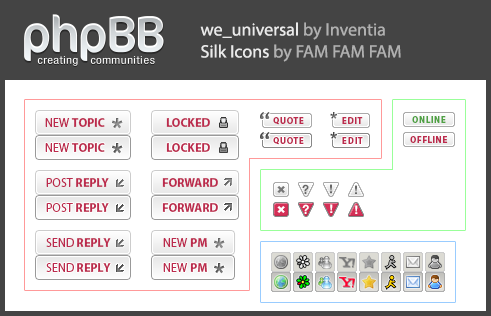
<style>
.page{position:relative;width:491px;height:316px;background:#ffffff}
.page>*{position:absolute;margin:0}
.t1{font:18px/22px "MyriadPro-Regular";color:#b0b0b0}
.t2{font:18px/22px "MyriadPro-Regular";color:#eaeaea}
.t3{font:12px "MyriadPro-Bold";letter-spacing:0.01em;color:#bc2a4d}
.t4{font:12px "MyriadPro-Regular";letter-spacing:0.01em;color:#bc2a4d}
.t5{font:9px "MyriadPro-Bold";letter-spacing:0.05em;color:#bc2a4d;text-transform:uppercase}
.t6{font:9px "MyriadPro-Bold";letter-spacing:0.05em;color:#4fa143;text-transform:uppercase}
.t7{font:9px "MyriadPro-Bold";letter-spacing:0.075em;color:#bc2a4d;text-transform:uppercase}
.t8{font:12.6px "HelveticaNeueLTCom-Bd";color:#666666}
.t9{font:12px "HelveticaNeueLTCom-Bd";color:#666666;scale:1.15 1}
.t10{font:12.6px "HelveticaNeueLTCom-Bd";color:#ffffff}
.t11{font:12px "HelveticaNeueLTCom-Bd";color:#ffffff;scale:1.15 1}
.t12{font:29px "HelveticaNeueLTStd-Bd"}
</style>
<div class="page">
<p class="t1" style="left:200px;top:22px;width:201px;height:40px;text-align:justify"><span class="t2">we_universal </span>by Inventia<br><span class="t2">Silk Icons </span>by FAM FAM FAM</p>
<p class="t3" style="left:45px;top:118px;width:60px;height:9px"><span class="t4">NEW </span>TOPIC</p>
<p class="t3" style="left:166px;top:118px;width:44px;height:9px">LOCKED</p>
<p class="t5" style="left:273px;top:117px;width:31px;height:8px">QUOTE</p>
<p class="t5" style="left:342px;top:117px;width:21px;height:7px">EDIT</p>
<p class="t6" style="left:412px;top:116px;width:34px;height:7px">online</p>
<p class="t5" style="left:273px;top:137px;width:31px;height:8px">QUOTE</p>
<p class="t7" style="left:342px;top:137px;width:21px;height:7px">EDIT</p>
<p class="t5" style="left:410px;top:136px;width:38px;height:7px">offline</p>
<p class="t3" style="left:45px;top:143px;width:60px;height:9px"><span class="t4">NEW </span>TOPIC</p>
<p class="t3" style="left:166px;top:143px;width:44px;height:9px">LOCKED</p>
<p class="t3" style="left:46px;top:178px;width:63px;height:9px"><span class="t4">POST </span>REPLY</p>
<p class="t3" style="left:162px;top:178px;width:56px;height:9px">FORWARD</p>
<p class="t8" style="left:302px;top:184px;width:7px;height:10px">?</p>
<p class="t9" style="left:330px;top:184px;width:2px;height:9px">!</p>
<p class="t9" style="left:355px;top:185px;width:2px;height:9px">!</p>
<p class="t3" style="left:46px;top:203px;width:63px;height:9px"><span class="t4">POST </span>REPLY</p>
<p class="t3" style="left:162px;top:203px;width:56px;height:9px">FORWARD</p>
<p class="t10" style="left:302px;top:204px;width:7px;height:10px">?</p>
<p class="t11" style="left:330px;top:204px;width:3px;height:9px">!</p>
<p class="t11" style="left:355px;top:205px;width:3px;height:9px">!</p>
<p class="t3" style="left:46px;top:238px;width:65px;height:9px"><span class="t4">SEND </span>REPLY</p>
<p class="t4" style="left:163px;top:238px;width:44px;height:9px">NEW <span class="t3">PM</span></p>
<p class="t3" style="left:46px;top:263px;width:65px;height:9px"><span class="t4">SEND </span>REPLY</p>
<p class="t4" style="left:163px;top:263px;width:44px;height:9px">NEW <span class="t3">PM</span></p>
<p class="t12" style="left:214px;top:263px;width:11px;height:11px">*</p>
</div>
